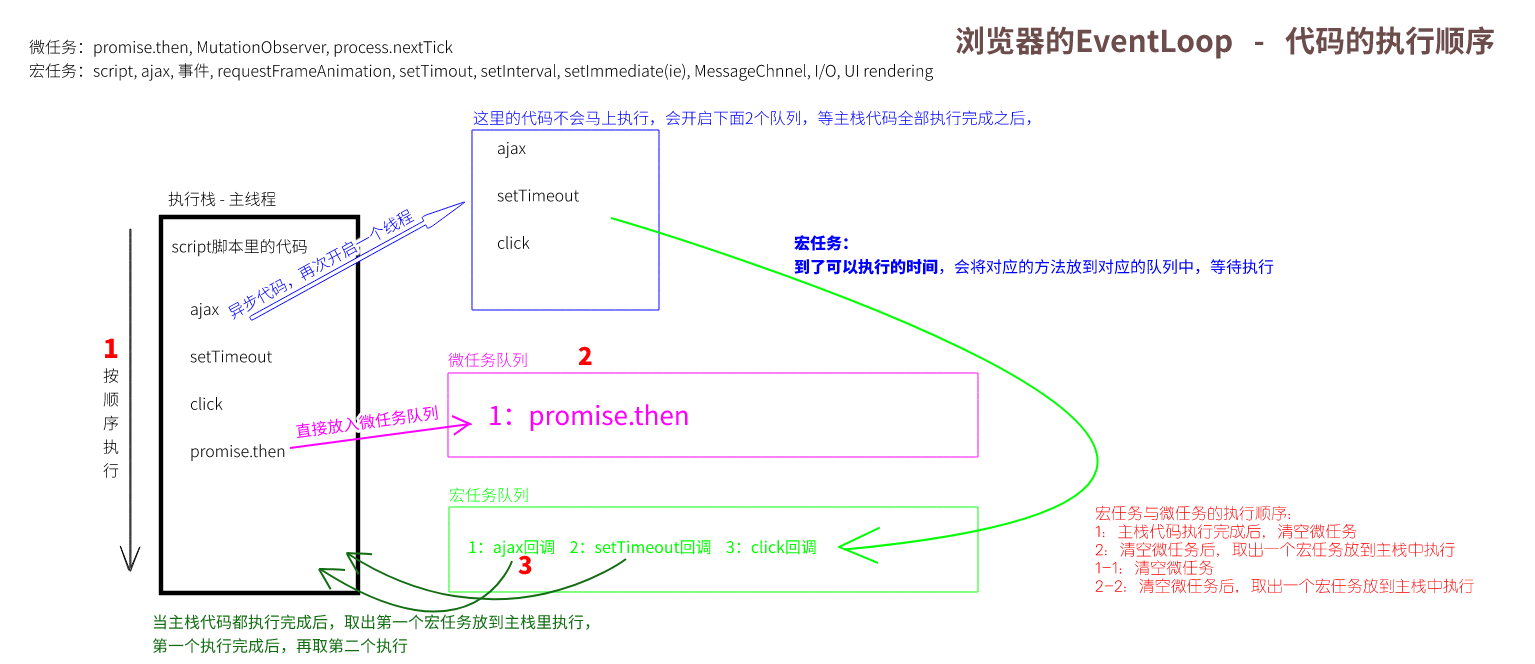
<style>
.page{position:relative;width:1535px;height:664px;background:#ffffff}
.page>*{position:absolute;margin:0}
.t1{font:30px "SourceHanSansSC-Bold";color:#6d4c4c}
.t2{font:16px "SourceHanSansSC-Light";color:#000000}
.t3{font:16px "SourceHanSansSC-Light";color:#0000ff}
.t4{font:16px "SourceHanSansSC-Regular";color:#0000ff}
.t5{font:16px "SourceHanSansSC-Heavy";color:#0000ff}
.t6{font:26px "SourceHanSansSC-Heavy";color:#ff0000}
.t7{font:16px "SourceHanSansSC-Light";color:#ff00ff}
.t8{font:24px "SourceHanSansSC-Heavy";color:#ff0000}
.t9{font:16px "SourceHanSansSC-Regular";color:#ff00ff}
.t10{font:26px "SourceHanSansSC-Regular";color:#ff00ff}
.t11{font:16px "SourceHanSansSC-Light";color:#00ff00}
.t12{font:16px "Reeji-CloudYuanXi-GB-Regular";color:#ff0000}
.t13{font:16px "SourceHanSansSC-Regular";color:#00ff00}
.t14{font:16px "SourceHanSansSC-Regular";color:#136d13}
</style>
<div class="page">
<p class="t1" style="left:955px;top:26px;width:539px;height:33px">浏览器的EventLoop   -   代码的执行顺序</p>
<p class="t2" style="left:29px;top:39px;width:905px;height:42px">微任务：promise.then, MutationObserver, process.nextTick<br>宏任务：script, ajax, 事件, requestFrameAnimation, setTimout, setInterval, setImmediate(ie), MessageChnnel, I/O, UI rendering</p>
<p class="t3" style="left:473px;top:110px;width:558px;height:16px">这里的代码不会马上执行，会开启下面2个队列，等主栈代码全部执行完成之后，</p>
<p class="t2" style="left:497px;top:141px;width:82px;height:108px">ajax<br><br>setTimeout<br><br>click</p>
<p class="t2" style="left:168px;top:191px;width:139px;height:66px">执行栈 - 主线程<br><br> script脚本里的代码</p>
<p class="t3" style="left:228px;top:209px;width:187px;height:111px;rotate:-29deg">异步代码，再次开启一个线程</p>
<p class="t4" style="left:794px;top:235px;width:480px;height:40px"><span class="t5">宏任务：<br>到了可以执行的时间</span>，会将对应的方法放到对应的队列中，等待执行</p>
<p class="t2" style="left:190px;top:302px;width:95px;height:159px">ajax<br><br>setTimeout<br><br>click<br><br>promise.then</p>
<p class="t2" style="left:103px;top:338px;width:16px;height:140px"><span class="t6">1<br></span>按<br>顺<br>序<br>执<br>行</p>
<p class="t7" style="left:448px;top:352px;width:79px;height:16px">微任务队列</p>
<p class="t8" style="left:578px;top:346px;width:14px;height:19px">2</p>
<p class="t9" style="left:296px;top:405px;width:142px;height:33px;rotate:-8deg">直接放入微任务队列</p>
<p class="t10" style="left:490px;top:404px;width:198px;height:27px">1：promise.then</p>
<p class="t11" style="left:449px;top:487px;width:79px;height:16px">宏任务队列</p>
<p class="t12" style="left:1095px;top:505px;width:379px;height:89px">宏任务与微任务的执行顺序：<br>1：主栈代码执行完成后，清空微任务<br>2：清空微任务后，取出一个宏任务放到主栈中执行<br>1-1：清空微任务<br>2-2：清空微任务后，取出一个宏任务放到主栈中执行</p>
<p class="t13" style="left:469px;top:539px;width:347px;height:18px">1：ajax回调    2：setTimeout回调    3：click回调</p>
<p class="t8" style="left:518px;top:555px;width:14px;height:20px">3</p>
<p class="t14" style="left:152px;top:614px;width:438px;height:40px">当主栈代码都执行完成后，取出第一个宏任务放到主栈里执行，<br>第一个执行完成后，再取第二个执行</p>
</div>
